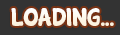
<style>
.page{position:relative;width:120px;height:35px;background:#333333}
.page>*{position:absolute;margin:0}
.t1{font:26px "Cartwheel";color:#ffffff}
</style>
<div class="page">
<p class="t1" style="left:11px;top:8px;width:103px;height:18px">LOading...</p>
</div>
